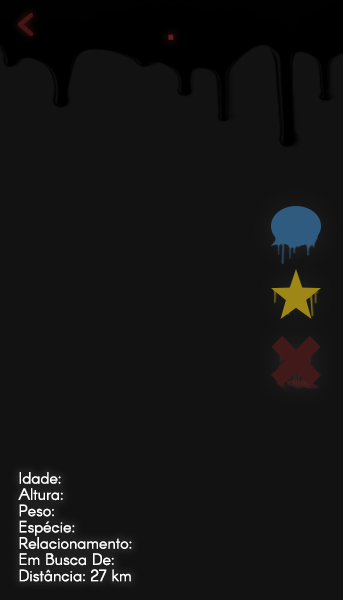
<style>
.page{position:relative;width:343px;height:600px;background:#121212}
.page>*{position:absolute;margin:0}
.t1{font:16px "Arcon-Regular";color:#ffffff}
</style>
<div class="page">
<p class="t1" style="left:18px;top:472px;width:114px;height:110px">Idade:<br>Altura:<br>Peso:<br>Espécie:<br>Relacionamento:<br>Em Busca De:<br>Distância: 27 km</p>
</div>
